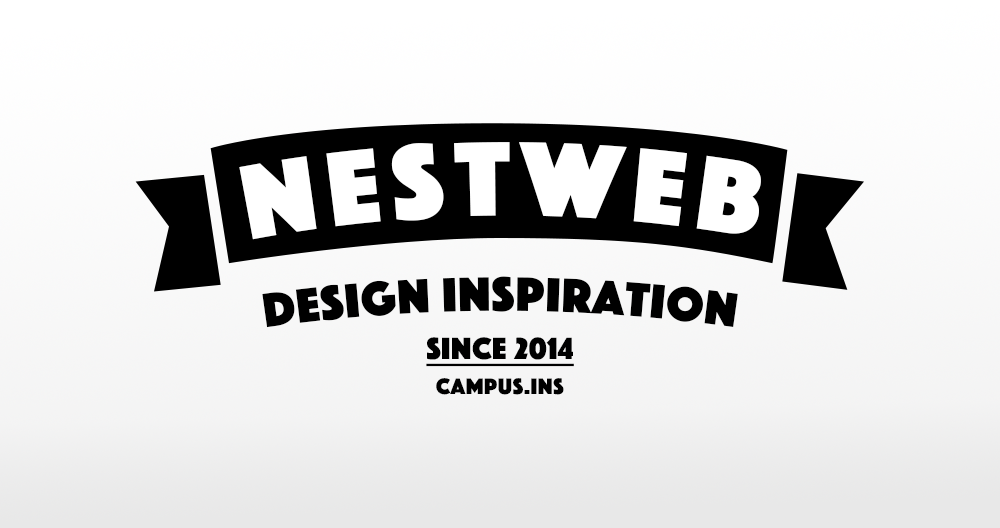
<style>
.page{position:relative;width:1000px;height:528px}
.page>*{position:absolute;margin:0}
.t1{font:110px "Phosphate-Solid";letter-spacing:0.1em;color:#ffffff}
.t2{font:50px "Phosphate-Solid";letter-spacing:0.02em;color:#000000}
.t3{font:31.6px/18.3px "Phosphate-Solid";letter-spacing:0.02em;color:#000000;text-decoration:underline}
.t4{font:23.3px/18.3px "Phosphate-Solid";letter-spacing:0.02em;color:#000000}
</style>
<div class="page">
<p class="t1" style="left:239px;top:142px;width:522px;height:98px">NESTWEB</p>
<p class="t2" style="left:262px;top:276px;width:476px;height:52px">design inspiration</p>
<p class="t3" style="left:426px;top:337px;width:148px;height:58px;text-align:center">since 2014<br><span class="t4">Campus.ins</span></p>
</div>
